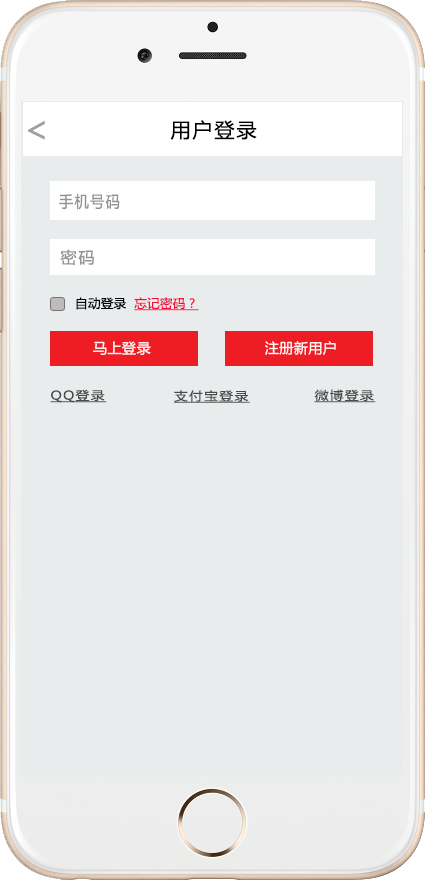
<style>
.page{position:relative;width:425px;height:880px;background:#e8eced}
.page>*{position:absolute;margin:0}
.t1{font:36px "MicrosoftYaHei";letter-spacing:0.1em;color:#a49e9e}
.t2{font:20px "MicrosoftYaHei";letter-spacing:0.1em;color:#000000}
.t3{font:16px "MicrosoftYaHei";letter-spacing:0.1em;color:#949291;scale:0.89 1}
.t4{font:16px "MicrosoftYaHei";letter-spacing:0.1em;color:#949291}
.t5{font:12.3px "MicrosoftYaHei";letter-spacing:0.02em;color:#f40d39;text-decoration:underline}
.t6{font:12.3px "MicrosoftYaHei";letter-spacing:0.02em;color:#000000}
.t7{font:13.9px "MicrosoftYaHei";letter-spacing:0.02em;color:#ffffff}
.t8{font:13.9px "MicrosoftYaHei";letter-spacing:0.02em;color:#ffffff;text-transform:uppercase}
.t9{font:11.9px "MicrosoftYaHei";letter-spacing:0.1em;color:#4a4a4a;text-decoration:underline;scale:1.15 1}
</style>
<div class="page">
<p class="t1" style="left:28px;top:120px;width:17px;height:20px">&lt;</p>
<p class="t2" style="left:170px;top:120px;width:87px;height:20px">用户登录</p>
<p class="t3" style="left:59px;top:193px;width:61px;height:17px">手机号码</p>
<p class="t4" style="left:60px;top:249px;width:34px;height:17px">密码</p>
<p class="t5" style="left:76px;top:297px;width:123px;height:14px"><span class="t6">自动登录  </span>忘记密码？</p>
<p class="t7" style="left:93px;top:341px;width:58px;height:14px">马上登录</p>
<p class="t8" style="left:265px;top:341px;width:71px;height:14px">注册新用户</p>
<p class="t9" style="left:50px;top:389px;width:56px;height:14px">QQ登录</p>
<p class="t9" style="left:174px;top:390px;width:76px;height:13px">支付宝登录</p>
<p class="t9" style="left:314px;top:389px;width:62px;height:14px">微博登录</p>
</div>
